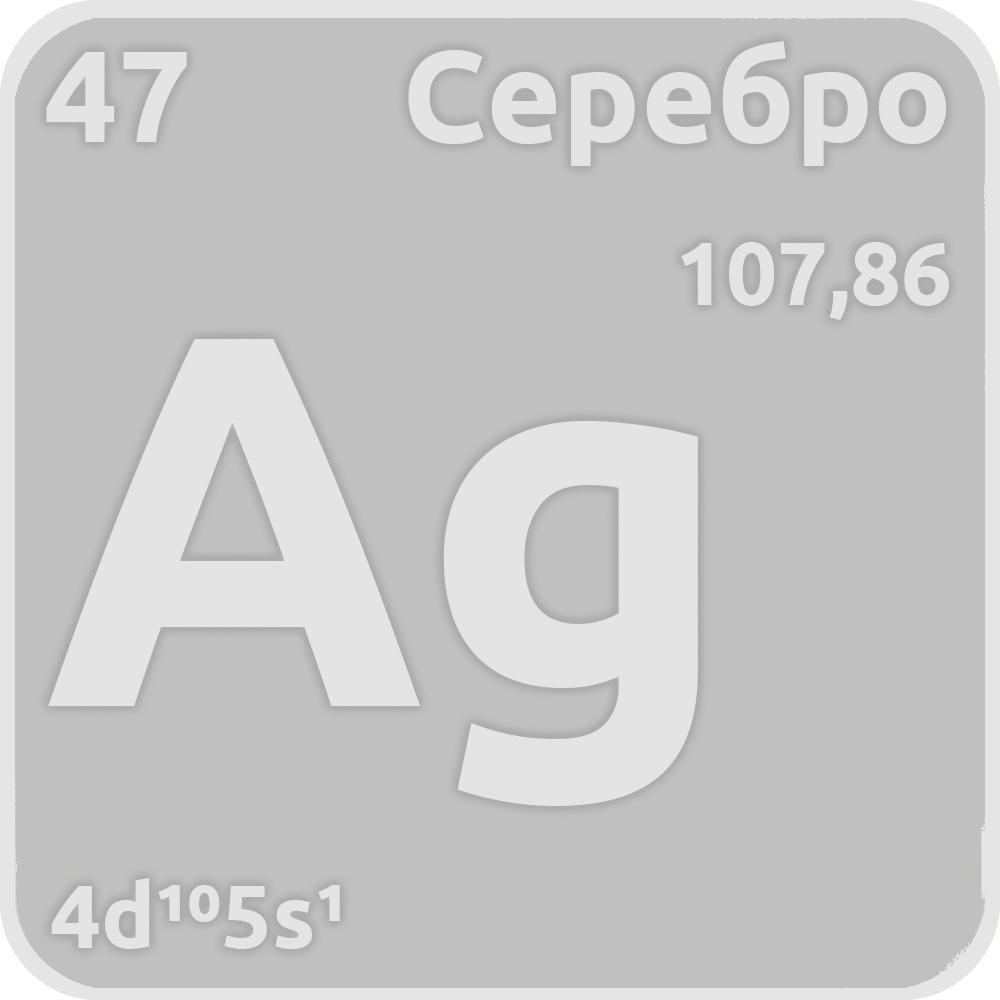
<style>
.page{position:relative;width:1000px;height:1000px;background:#c0c0c0}
.page>*{position:absolute;margin:0}
.t1{font:130px "Ubuntu-Bold";color:#e4e4e4}
.t2{font:90px "Ubuntu-Bold";color:#e4e4e4}
.t3{font:530px "Ubuntu-Bold";color:#e4e4e4}
</style>
<div class="page">
<p class="t1" style="left:408px;top:41px;width:538px;height:125px">Серебро</p>
<p class="t1" style="left:46px;top:52px;width:141px;height:90px">47</p>
<p class="t2" style="left:681px;top:242px;width:268px;height:78px">107,86</p>
<p class="t3" style="left:48px;top:339px;width:650px;height:467px">Ag</p>
<p class="t2" style="left:51px;top:878px;width:289px;height:71px">4d¹⁰5s¹</p>
</div>
